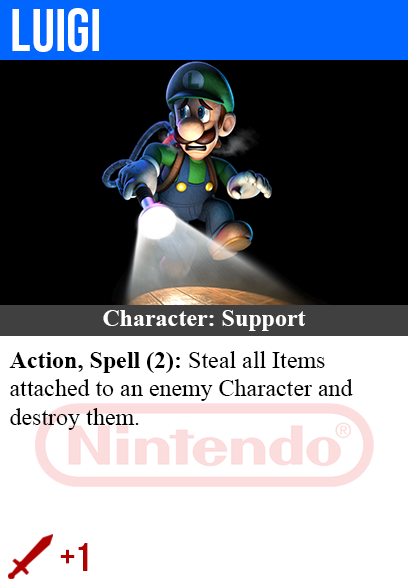
<style>
.page{position:relative;width:408px;height:585px;background:#ffffff}
.page>*{position:absolute;margin:0}
.t1{font:60px "BebasNeue-Regular";color:#ffffff}
.t2{font:24px "TimesNewRomanPS-BoldMT";color:#ffffff}
.t3{font:24px "TimesNewRomanPSMT";color:#000000}
.t4{font:24px "TimesNewRomanPS-BoldMT";color:#000000}
.t5{font:40px "BebasNeue-Regular";color:#af0202}
</style>
<div class="page">
<p class="t1" style="left:12px;top:8px;width:87px;height:44px">luigi</p>
<p class="t2" style="left:103px;top:310px;width:203px;height:21px">Character: Support</p>
<p class="t3" style="left:9px;top:351px;width:344px;height:79px"><span class="t4">Action, Spell (2):</span> Steal all Items<br>attached to an enemy Character and<br>destroy them.</p>
<p class="t5" style="left:60px;top:543px;width:28px;height:28px">+1</p>
</div>
